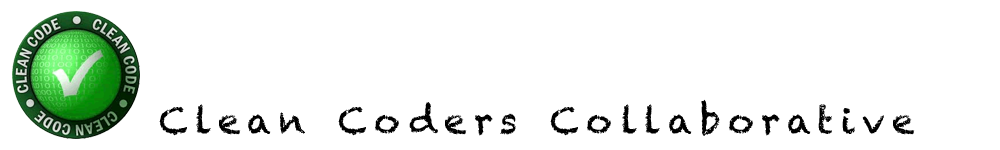
<style>
.page{position:relative;width:1000px;height:150px;background:#ffffff}
.page>*{position:absolute;margin:0}
.t1{font:36px "Chalkduster";letter-spacing:0.2em;color:#000000}
</style>
<div class="page">
<p class="t1" style="left:159px;top:99px;width:756px;height:37px">Clean Coders Collaborative</p>
</div>
